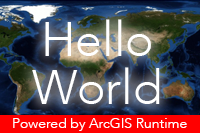
<style>
.page{position:relative;width:200px;height:133px}
.page>*{position:absolute;margin:0}
.t1{font:48px/48px "Avenir-Light";color:#ffffff}
.t2{font:14px "Avenir-Light";color:#ffffff}
</style>
<div class="page">
<p class="t1" style="left:32px;top:19px;width:128px;height:85px;text-align:center">Hello<br>World</p>
<p class="t2" style="left:13px;top:118px;width:174px;height:13px">Powered by ArcGIS Runtime</p>
</div>
